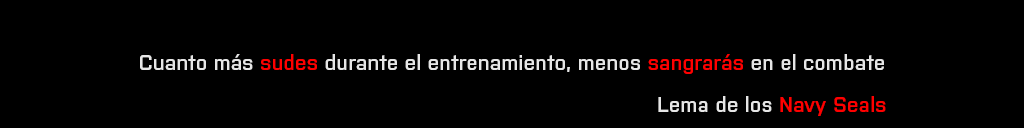
<style>
.page{position:relative;width:1024px;height:128px;background:#000000}
.page>*{position:absolute;margin:0}
.t1{font:21px "Purista-SemiBold";color:#e6e6e6}
.t2{font:21px "Purista-SemiBold";color:#ff0000}
</style>
<div class="page">
<p class="t1" style="left:140px;top:54px;width:744px;height:20px">Cuanto más <span class="t2">sudes</span> durante el entrenamiento, menos <span class="t2">sangrarás</span> en el combate</p>
<p class="t1" style="left:658px;top:96px;width:228px;height:20px">Lema de los <span class="t2">Navy Seals</span></p>
</div>
